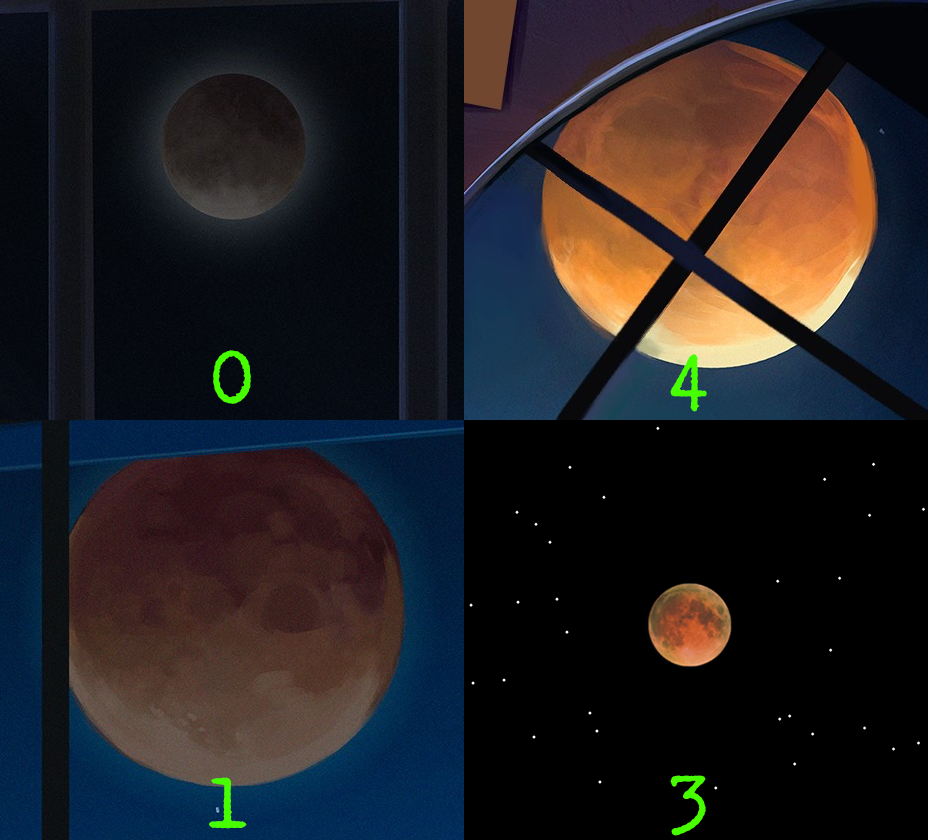
<style>
.page{position:relative;width:928px;height:840px;background:#000000}
.page>*{position:absolute;margin:0}
.t1{font:72px "HOLLYWOOD-STARFIRE";color:#48ff00}
</style>
<div class="page">
<p class="t1" style="left:213px;top:350px;width:38px;height:54px">0</p>
<p class="t1" style="left:670px;top:354px;width:37px;height:58px">4</p>
<p class="t1" style="left:209px;top:777px;width:38px;height:52px">1</p>
<p class="t1" style="left:670px;top:775px;width:36px;height:61px">3</p>
</div>
